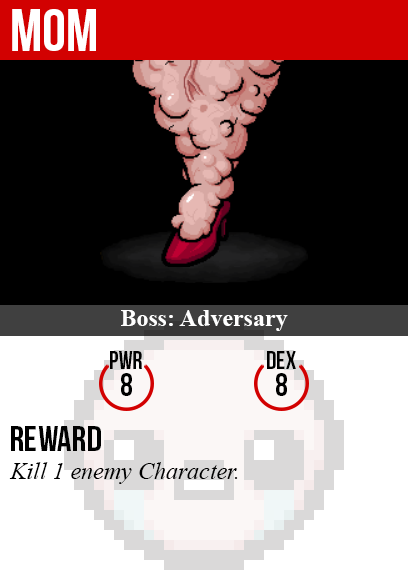
<style>
.page{position:relative;width:408px;height:585px;background:#000000}
.page>*{position:absolute;margin:0}
.t1{font:60px "BebasNeue";color:#ffffff}
.t2{font:24px "TimesNewRomanPS-BoldMT";color:#ffffff}
.t3{font:25px "BebasNeue";color:#000000}
.t4{font:32px "BebasNeue";color:#000000}
.t5{font:36px "BebasNeue";color:#000000}
.t6{font:24px "TimesNewRomanPS-ItalicMT";color:#000000}
</style>
<div class="page">
<p class="t1" style="left:12px;top:9px;width:84px;height:42px">mom</p>
<p class="t2" style="left:121px;top:310px;width:167px;height:21px">Boss: Adversary</p>
<p class="t3" style="left:110px;top:351px;width:32px;height:18px">PWR</p>
<p class="t3" style="left:267px;top:351px;width:29px;height:18px">dex</p>
<p class="t4" style="left:121px;top:373px;width:11px;height:23px">8</p>
<p class="t4" style="left:276px;top:373px;width:11px;height:23px">8</p>
<p class="t5" style="left:11px;top:426px;width:90px;height:25px">reward</p>
<p class="t6" style="left:9px;top:462px;width:229px;height:22px">Kill 1 enemy Character.</p>
</div>
